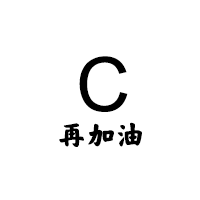
<style>
.page{position:relative;width:200px;height:200px;background:#ffffff}
.page>*{position:absolute;margin:0}
.t1{font:75px "ArialMT";color:#000000}
.t2{font:29.2px "COCA-COLACAREFONTKAITI--GB1-0";color:#000000}
</style>
<div class="page">
<p class="t1" style="left:79px;top:56px;width:49px;height:56px">C</p>
<p class="t2" style="left:59px;top:122px;width:83px;height:25px">再加油</p>
</div>
